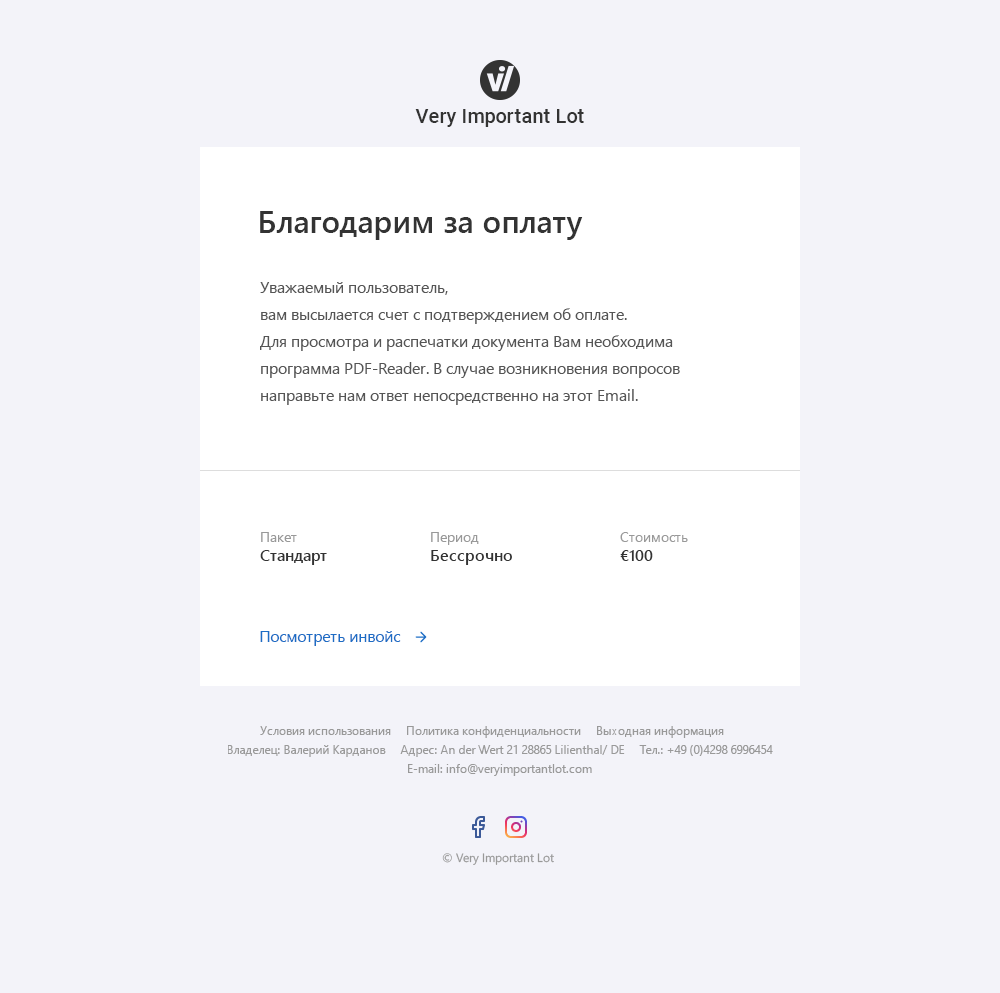
<style>
.page{position:relative;width:1000px;height:993px;background:#f3f3f9}
.page>*{position:absolute;margin:0}
.t1{font:20px "Roboto-Medium";color:#333333}
.t2{font:31px "SegoeUI-Semibold";color:#333333}
.t3{font:16px/27px "SegoeUI";color:#555555}
.t4{font:16px "SegoeUI-Semibold";color:#333333}
.t5{font:14px "SegoeUI";color:#999999}
.t6{font:16px "SegoeUI";color:#1d6dc5}
</style>
<div class="page">
<p class="t1" style="left:415px;top:109px;width:169px;height:18px">Very Important Lot</p>
<p class="t2" style="left:260px;top:211px;width:323px;height:29px">Благодарим за оплату</p>
<p class="t3" style="left:260px;top:282px;width:420px;height:123px">Уважаемый пользователь,<br>вам высылается счет с подтверждением об оплате. <br>Для просмотра и распечатки документа Вам необходима программа PDF-Reader. В случае возникновения вопросов направьте нам ответ непосредственно на этот Email.</p>
<p class="t4" style="left:260px;top:532px;width:67px;height:33px"><span class="t5">Пакет<br></span>Стандарт</p>
<p class="t4" style="left:431px;top:532px;width:81px;height:33px"><span class="t5">Период<br></span>Бессрочно</p>
<p class="t5" style="left:620px;top:532px;width:68px;height:29px">Стоимость<br><span class="t4">€100</span></p>
<p class="t6" style="left:260px;top:631px;width:141px;height:15px">Посмотреть инвойс</p>
</div>
